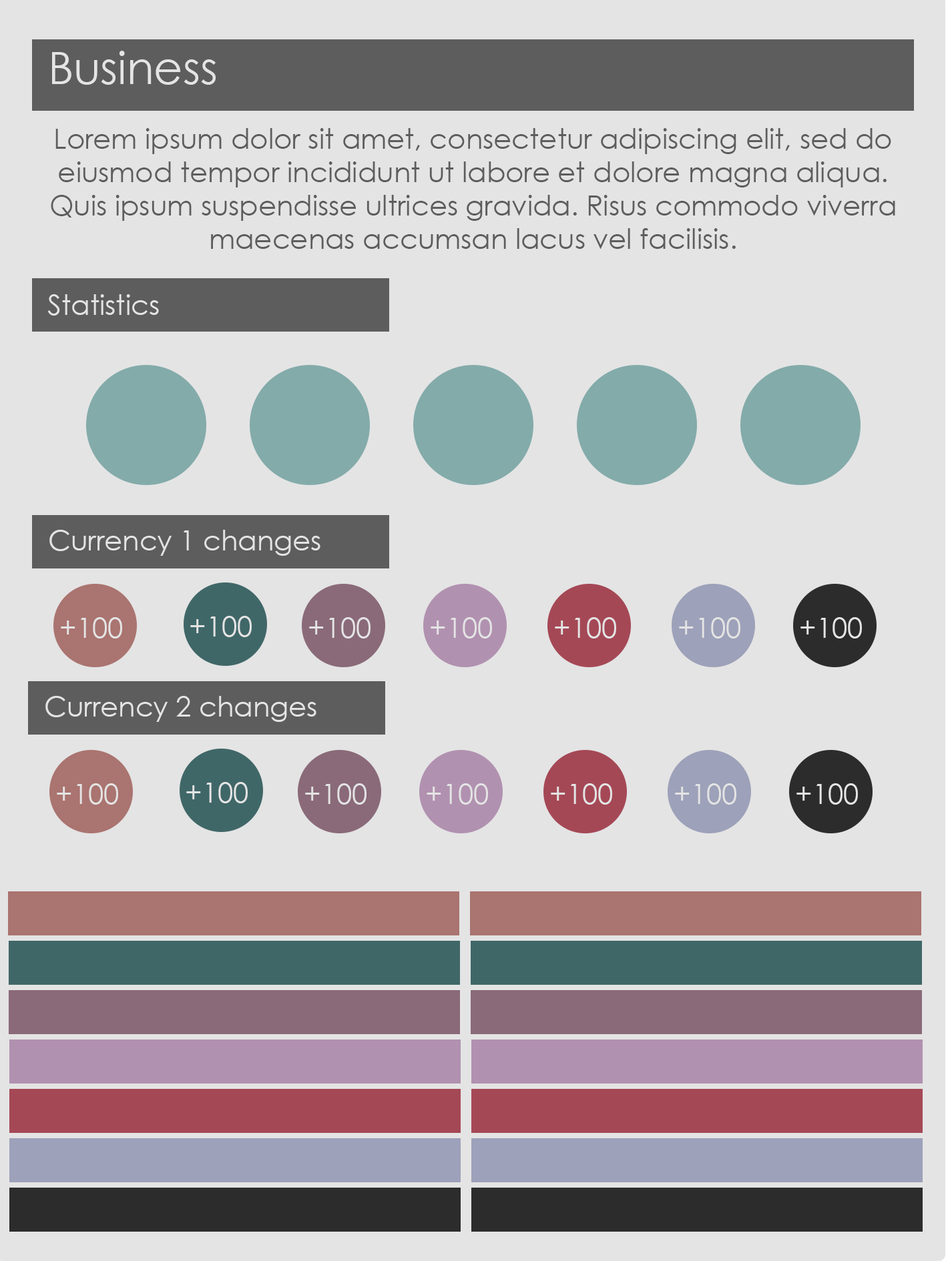
<style>
.page{position:relative;width:946px;height:1261px;background:#e4e4e4}
.page>*{position:absolute;margin:0}
.t1{font:44.5px "CenturyGothic";color:#e4e4e4}
.t2{font:27.8px "CenturyGothic";color:#5d5d5d}
.t3{font:27.8px "CenturyGothic";color:#e4e4e4}
</style>
<div class="page">
<p class="t1" style="left:52px;top:51px;width:164px;height:34px">Business</p>
<p class="t2" style="left:51px;top:128px;width:844px;height:121px;text-align:center">Lorem ipsum dolor sit amet, consectetur adipiscing elit, sed do eiusmod tempor incididunt ut labore et dolore magna aliqua. Quis ipsum suspendisse ultrices gravida. Risus commodo viverra maecenas accumsan lacus vel facilisis.</p>
<p class="t3" style="left:47px;top:294px;width:112px;height:22px">Statistics</p>
<p class="t3" style="left:49px;top:530px;width:271px;height:26px">Currency 1 changes</p>
<p class="t3" style="left:61px;top:617px;width:61px;height:22px">+100</p>
<p class="t3" style="left:190px;top:616px;width:62px;height:21px">+100</p>
<p class="t3" style="left:309px;top:617px;width:61px;height:22px">+100</p>
<p class="t3" style="left:430px;top:617px;width:62px;height:22px">+100</p>
<p class="t3" style="left:555px;top:617px;width:61px;height:22px">+100</p>
<p class="t3" style="left:679px;top:617px;width:61px;height:22px">+100</p>
<p class="t3" style="left:800px;top:617px;width:61px;height:22px">+100</p>
<p class="t3" style="left:45px;top:696px;width:271px;height:26px">Currency 2 changes</p>
<p class="t3" style="left:57px;top:783px;width:61px;height:22px">+100</p>
<p class="t3" style="left:186px;top:782px;width:62px;height:21px">+100</p>
<p class="t3" style="left:305px;top:783px;width:61px;height:22px">+100</p>
<p class="t3" style="left:426px;top:783px;width:62px;height:22px">+100</p>
<p class="t3" style="left:550px;top:783px;width:62px;height:22px">+100</p>
<p class="t3" style="left:675px;top:783px;width:61px;height:22px">+100</p>
<p class="t3" style="left:796px;top:783px;width:61px;height:22px">+100</p>
</div>
